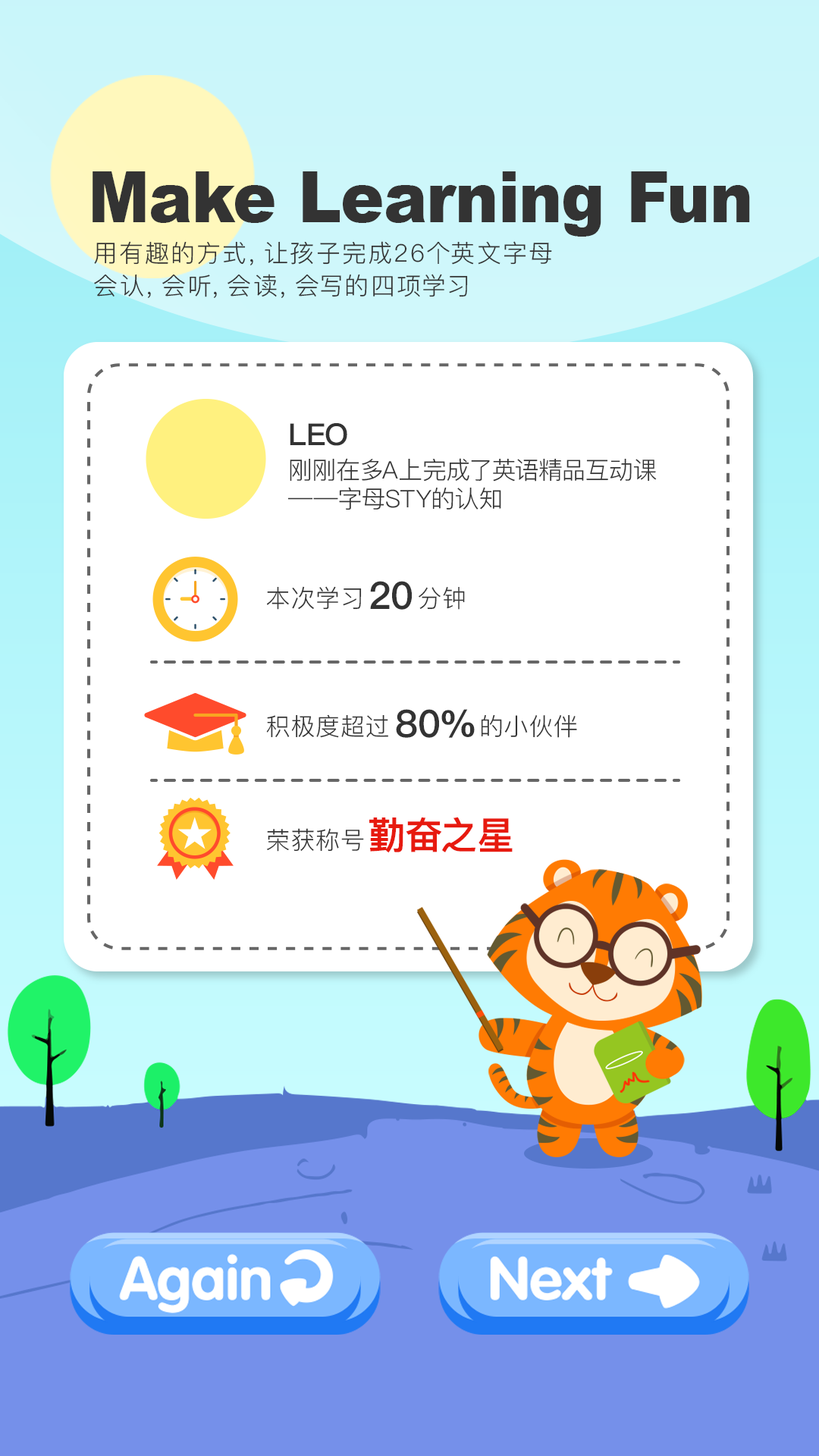
<style>
.page{position:relative;width:819px;height:1456px;background:#ffffff}
.page>*{position:absolute;margin:0}
.t1{font:70.5px "Arial-Black";color:#333333;scale:0.93 1}
.t2{font:24.3px/32.8px "PingFang-SC-Regular";letter-spacing:0.1em;color:#333333}
.t3{font:30.3px "PingFang-SC-Heavy";color:#333333}
.t4{font:24.3px "PingFang-SC-Regular";letter-spacing:0.01em;color:#333333}
.t5{font:37.9px "PingFang-SC-Heavy";letter-spacing:-0.005em;color:#333333}
.t6{font:24.3px "PingFang-SC-Regular";color:#333333}
.t7{font:37.9px "PingFang-SC-Heavy";letter-spacing:-0.005em;color:#e71a0f}
</style>
<div class="page">
<p class="t1" style="left:93px;top:171px;width:657px;height:66px">Make Learning Fun</p>
<p class="t2" style="left:94px;top:241px;width:458px;height:57px">用有趣的方式，让孩子完成26个英文字母<br>会认，会听，会读，会写的四项学习</p>
<p class="t3" style="left:290px;top:423px;width:57px;height:23px">LEO</p>
<p class="t4" style="left:287px;top:458px;width:370px;height:52px">刚刚在多A上完成了英语精品互动课——字母STY的认知</p>
<p class="t5" style="left:370px;top:581px;width:42px;height:29px">20</p>
<p class="t6" style="left:267px;top:586px;width:95px;height:24px">本次学习</p>
<p class="t6" style="left:419px;top:587px;width:46px;height:23px">分钟</p>
<p class="t5" style="left:396px;top:709px;width:79px;height:29px">80%</p>
<p class="t6" style="left:266px;top:714px;width:122px;height:24px">积极度超过</p>
<p class="t6" style="left:481px;top:714px;width:96px;height:24px">的小伙伴</p>
<p class="t7" style="left:369px;top:817px;width:144px;height:36px">勤奋之星</p>
<p class="t6" style="left:267px;top:828px;width:97px;height:24px">荣获称号</p>
</div>
